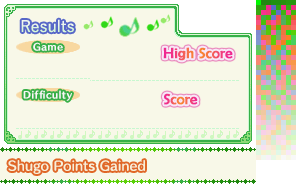
<style>
.page{position:relative;width:296px;height:192px;background:#f8f8e8}
.page>*{position:absolute;margin:0}
.t1{font:16px "YuGothic-Medium";color:#dff8df}
.t2{font:9px "HummingStd-E";letter-spacing:0.05em;color:#f8f8f8}
.t3{font:15px "BerlinSansFB-Reg";font-weight:bold}
.t4{font:12px "HummingStd-D";letter-spacing:0.025em;color:#f8f0d8}
</style>
<div class="page">
<p class="t1" style="left:21px;top:19px;width:53px;height:14px">Results</p>
<p class="t2" style="left:33px;top:42px;width:30px;height:9px">Game</p>
<p class="t3" style="left:163px;top:47px;width:70px;height:14px">High Score</p>
<p class="t2" style="left:23px;top:90px;width:49px;height:11px">Difficulty</p>
<p class="t3" style="left:164px;top:93px;width:34px;height:12px">Score</p>
<p class="t4" style="left:8px;top:160px;width:137px;height:14px">Shugo Points Gained</p>
</div>
